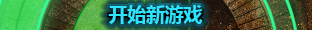
<style>
.page{position:relative;width:312px;height:30px}
.page>*{position:absolute;margin:0}
.t1{font:18.8px "MicrosoftYaHei-Bold";color:#2de4ff}
</style>
<div class="page">
<p class="t1" style="left:108px;top:5px;width:95px;height:19px">开始新游戏</p>
</div>
